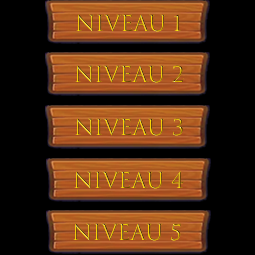
<style>
.page{position:relative;width:255px;height:255px;background:#000000}
.page>*{position:absolute;margin:0}
.t1{font:21.2px "TrajanColor-Concept"}
</style>
<div class="page">
<p class="t1" style="left:76px;top:14px;width:105px;height:18px">Niveau 1</p>
<p class="t1" style="left:75px;top:65px;width:109px;height:18px">Niveau 2</p>
<p class="t1" style="left:75px;top:118px;width:108px;height:18px">Niveau 3</p>
<p class="t1" style="left:74px;top:171px;width:110px;height:18px">Niveau 4</p>
<p class="t1" style="left:73px;top:223px;width:108px;height:18px">Niveau 5</p>
</div>
